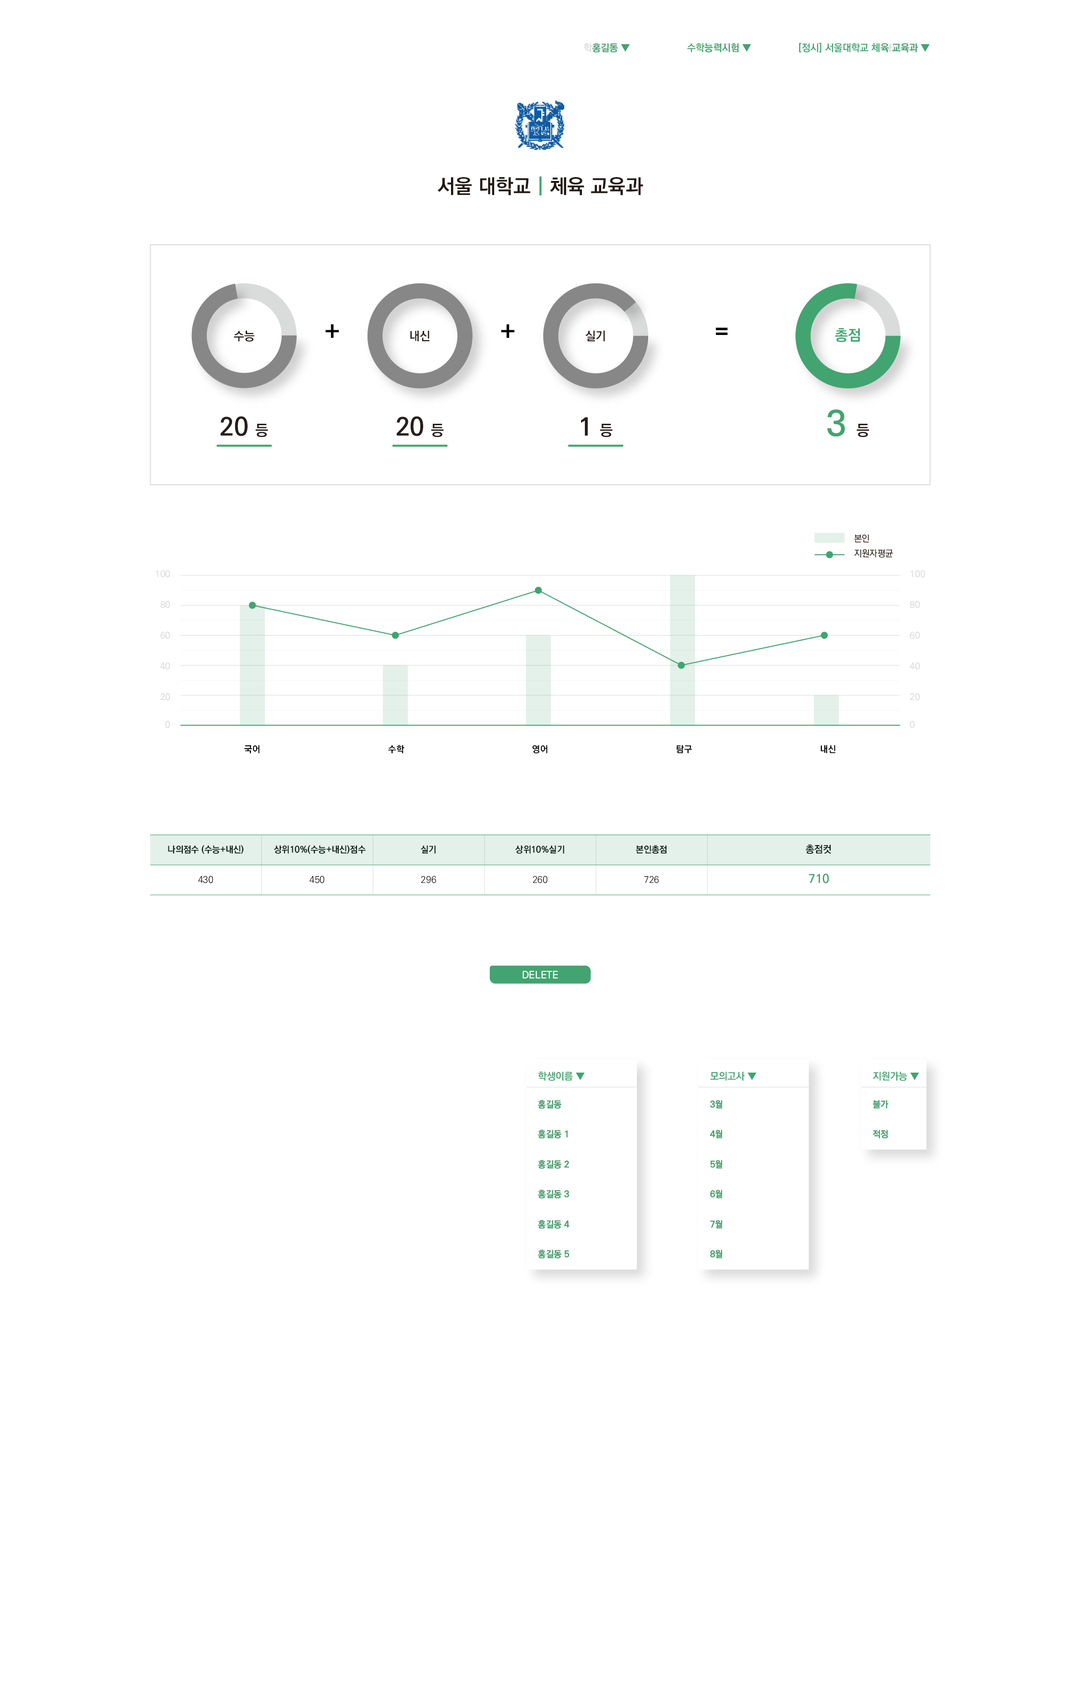
<style>
.page{position:relative;width:1080px;height:1696px;background:#ffffff}
.page>*{position:absolute;margin:0}
.t1{font:10px "KoPubWorldDotumPB"}
.t2{font:10px "KoPubWorldDotumPB";color:#42a470}
.t3{font:20px "KoPubWorldDotumPB";color:#231815}
.t4{font:20px "KoPubWorldDotumPB";color:#42a470}
.t5{font:25px "KoPubWorldDotumPB";color:#000000}
.t6{font:15px/95px "KoPubWorldDotumPB";color:#42a470}
.t7{font:35px/95px "KoPubWorldDotumPB";color:#42a470}
.t8{font:15px/95px "KoPubWorldDotumPB";color:#281e1c}
.t9{font:12px/95px "KoPubWorldDotumPB";color:#281e1c}
.t10{font:25px/95px "KoPubWorldDotumPB";color:#281e1c}
.t11{font:9px "KoPubWorldDotumPM";color:#231815}
.t12{font:9px "KoPubWorldDotumPM";color:#dadbdb}
.t13{font:9px "KoPubWorldDotumPB";color:#000000}
.t14{font:10px "KoPubWorldDotumPB";color:#000000}
.t15{font:9px "KoPubWorldDotumPL";color:#000000}
.t16{font:12px "KoPubWorldDotumPB";color:#42a470}
.t17{font:10px "KoPubWorldDotumPB";color:#ffffff;text-transform:uppercase}
.t18{font:9px/30px "KoPubWorldDotumPB";color:#41a470}
.t19{font:9px/30px "KoPubWorldDotumPB";color:#42a470}
</style>
<div class="page">
<p class="t1" style="left:584px;top:43px;width:46px;height:9px">학생이름 ▼</p>
<p class="t2" style="left:592px;top:43px;width:38px;height:10px">홍길동 ▼</p>
<p class="t2" style="left:687px;top:43px;width:65px;height:10px">수학능력시험 ▼</p>
<p class="t1" style="left:705px;top:43px;width:47px;height:9px">모의고사 ▼</p>
<p class="t2" style="left:799px;top:43px;width:131px;height:10px">[정시] 서울대학교 체육 교육과 ▼</p>
<p class="t1" style="left:884px;top:43px;width:46px;height:9px">나의저장 ▼</p>
<p class="t3" style="left:438px;top:176px;width:206px;height:20px">서울 대학교<span class="t4"> | </span>체육 교육과</p>
<p class="t5" style="left:325px;top:324px;width:14px;height:14px">+</p>
<p class="t5" style="left:501px;top:324px;width:14px;height:14px">+</p>
<p class="t5" style="left:716px;top:327px;width:12px;height:8px">=</p>
<p class="t6" style="left:828px;top:328px;width:42px;height:109px;text-align:center">총점<br><span class="t7">3 </span><span class="t8">등</span></p>
<p class="t9" style="left:220px;top:331px;width:48px;height:106px;text-align:center">수능<br><span class="t10">20 </span><span class="t8">등</span></p>
<p class="t9" style="left:396px;top:331px;width:48px;height:106px;text-align:center">내신<br><span class="t10">20 </span><span class="t8">등</span></p>
<p class="t9" style="left:581px;top:331px;width:32px;height:106px;text-align:center">실기<br><span class="t10">1 </span><span class="t8">등</span></p>
<p class="t11" style="left:854px;top:534px;width:16px;height:9px">본인</p>
<p class="t11" style="left:854px;top:549px;width:39px;height:9px">지원자평균</p>
<p class="t12" style="left:156px;top:570px;width:14px;height:8px">100</p>
<p class="t12" style="left:911px;top:570px;width:14px;height:8px">100</p>
<p class="t12" style="left:160px;top:601px;width:10px;height:8px">80</p>
<p class="t12" style="left:910px;top:601px;width:10px;height:8px">80</p>
<p class="t12" style="left:160px;top:632px;width:10px;height:7px">60</p>
<p class="t12" style="left:910px;top:632px;width:10px;height:7px">60</p>
<p class="t12" style="left:160px;top:662px;width:10px;height:8px">40</p>
<p class="t12" style="left:910px;top:662px;width:10px;height:8px">40</p>
<p class="t12" style="left:160px;top:693px;width:10px;height:8px">20</p>
<p class="t12" style="left:910px;top:693px;width:10px;height:8px">20</p>
<p class="t12" style="left:165px;top:721px;width:5px;height:8px">0</p>
<p class="t12" style="left:910px;top:721px;width:5px;height:8px">0</p>
<p class="t13" style="left:244px;top:745px;width:16px;height:9px">국어</p>
<p class="t13" style="left:388px;top:745px;width:17px;height:9px">수학</p>
<p class="t13" style="left:532px;top:745px;width:16px;height:9px">영어</p>
<p class="t13" style="left:677px;top:745px;width:16px;height:9px">탐구</p>
<p class="t13" style="left:821px;top:745px;width:15px;height:9px">내신</p>
<p class="t13" style="left:168px;top:845px;width:76px;height:9px">나의점수 (수능+내신)</p>
<p class="t13" style="left:274px;top:845px;width:92px;height:9px">상위10%(수능+내신)점수</p>
<p class="t13" style="left:421px;top:845px;width:15px;height:9px">실기</p>
<p class="t13" style="left:516px;top:845px;width:48px;height:9px">상위10%실기</p>
<p class="t13" style="left:636px;top:845px;width:31px;height:9px">본인총점</p>
<p class="t14" style="left:806px;top:845px;width:26px;height:9px">총점컷</p>
<p class="t15" style="left:198px;top:876px;width:15px;height:8px">430</p>
<p class="t15" style="left:310px;top:876px;width:14px;height:8px">450</p>
<p class="t15" style="left:421px;top:876px;width:15px;height:7px">296</p>
<p class="t15" style="left:533px;top:876px;width:15px;height:8px">260</p>
<p class="t15" style="left:644px;top:876px;width:15px;height:7px">726</p>
<p class="t16" style="left:809px;top:874px;width:20px;height:10px">710</p>
<p class="t17" style="left:523px;top:971px;width:35px;height:8px">delete</p>
<p class="t17" style="left:523px;top:971px;width:35px;height:8px">delete</p>
<p class="t2" style="left:539px;top:1072px;width:46px;height:9px">학생이름 ▼</p>
<p class="t2" style="left:710px;top:1072px;width:47px;height:9px">모의고사 ▼</p>
<p class="t2" style="left:873px;top:1072px;width:47px;height:9px">지원가능 ▼</p>
<p class="t18" style="left:538px;top:1100px;width:32px;height:159px">홍길동<br>홍길동 1<br>홍길동 2<br>홍길동 3<br>홍길동 4<br>홍길동 5</p>
<p class="t19" style="left:538px;top:1100px;width:32px;height:159px">홍길동<br>홍길동 1<br>홍길동 2<br>홍길동 3<br>홍길동 4<br>홍길동 5</p>
<p class="t18" style="left:710px;top:1100px;width:13px;height:159px">3월<br>4월<br>5월<br>6월<br>7월<br>8월</p>
<p class="t19" style="left:710px;top:1100px;width:13px;height:159px">3월<br>4월<br>5월<br>6월<br>7월<br>8월</p>
<p class="t18" style="left:873px;top:1100px;width:16px;height:39px">불가<br>적정</p>
<p class="t19" style="left:873px;top:1100px;width:16px;height:39px">불가<br>적정</p>
</div>
